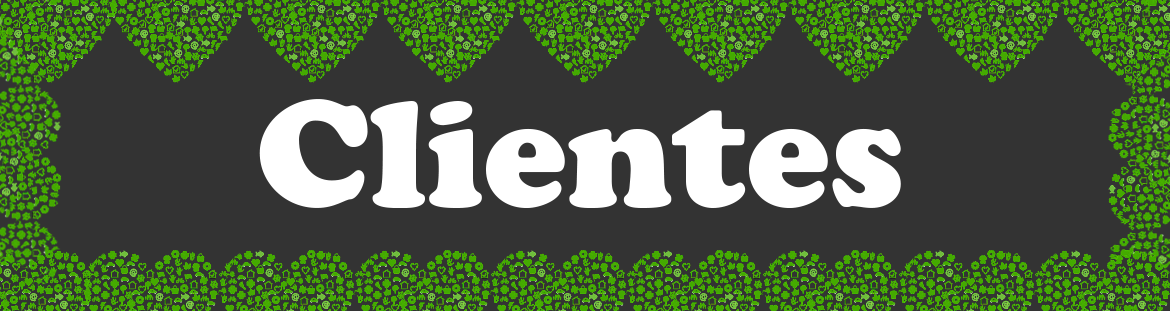
<style>
.page{position:relative;width:1170px;height:311px;background:#333333}
.page>*{position:absolute;margin:0}
.t1{font:150px "CooperBlackStd";color:#ffffff}
</style>
<div class="page">
<p class="t1" style="left:259px;top:99px;width:642px;height:109px">Clientes</p>
</div>
